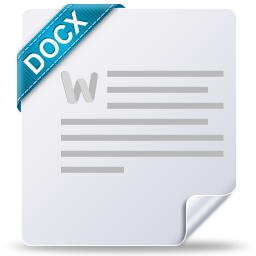
<style>
.page{position:relative;width:256px;height:256px}
.page>*{position:absolute;margin:0}
.t1{font:26px "Arial-BoldMT";color:#ffffff}
</style>
<div class="page">
<p class="t1" style="left:23px;top:9px;width:66px;height:66px;rotate:-45deg">DOCX</p>
</div>
